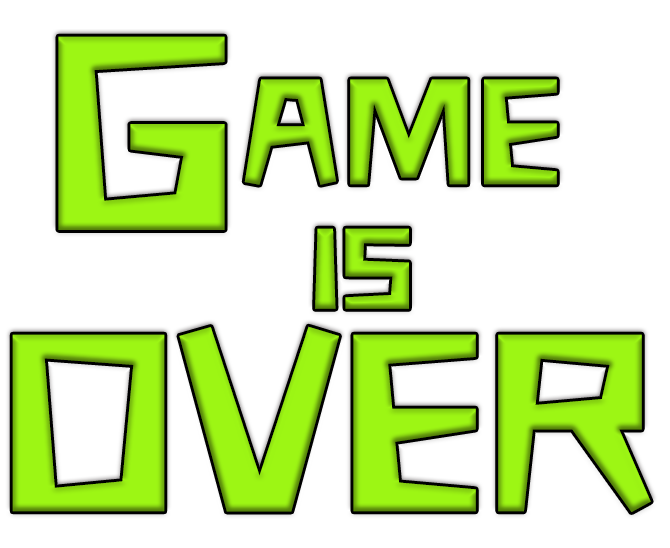
<style>
.page{position:relative;width:670px;height:548px;background:#ffffff}
.page>*{position:absolute;margin:0}
.t1{font:324px "HYQuHeiW";color:#9df614}
.t2{font:176px "HYQuHeiW";color:#9df614}
.t3{font:134px "HYQuHeiW"}
.t4{font:296px "HYQuHeiW";color:#9df614}
</style>
<div class="page">
<p class="t1" style="left:58px;top:36px;width:167px;height:194px">G</p>
<p class="t2" style="left:244px;top:79px;width:313px;height:106px">AME</p>
<p class="t3" style="left:315px;top:228px;width:94px;height:81px">IS</p>
<p class="t4" style="left:12px;top:326px;width:639px;height:186px">OVER</p>
</div>
